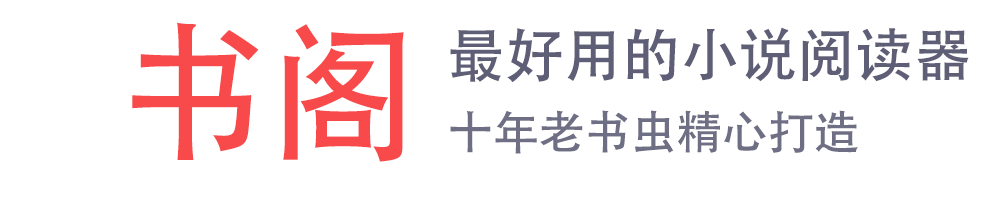
<style>
.page{position:relative;width:1000px;height:200px;background:#ffffff}
.page>*{position:absolute;margin:0}
.t1{font:150px "AdobeHeitiStd-Regular";color:#f84a4a}
.t2{font:58.3px "AdobeHeitiStd-Regular";color:#5e5e77}
.t3{font:45.8px "AdobeHeitiStd-Regular";color:#6e6e84}
</style>
<div class="page">
<p class="t1" style="left:132px;top:22px;width:272px;height:140px">书阁</p>
<p class="t2" style="left:450px;top:27px;width:519px;height:55px">最好用的小说阅读器</p>
<p class="t3" style="left:450px;top:110px;width:408px;height:44px">十年老书虫精心打造</p>
</div>
